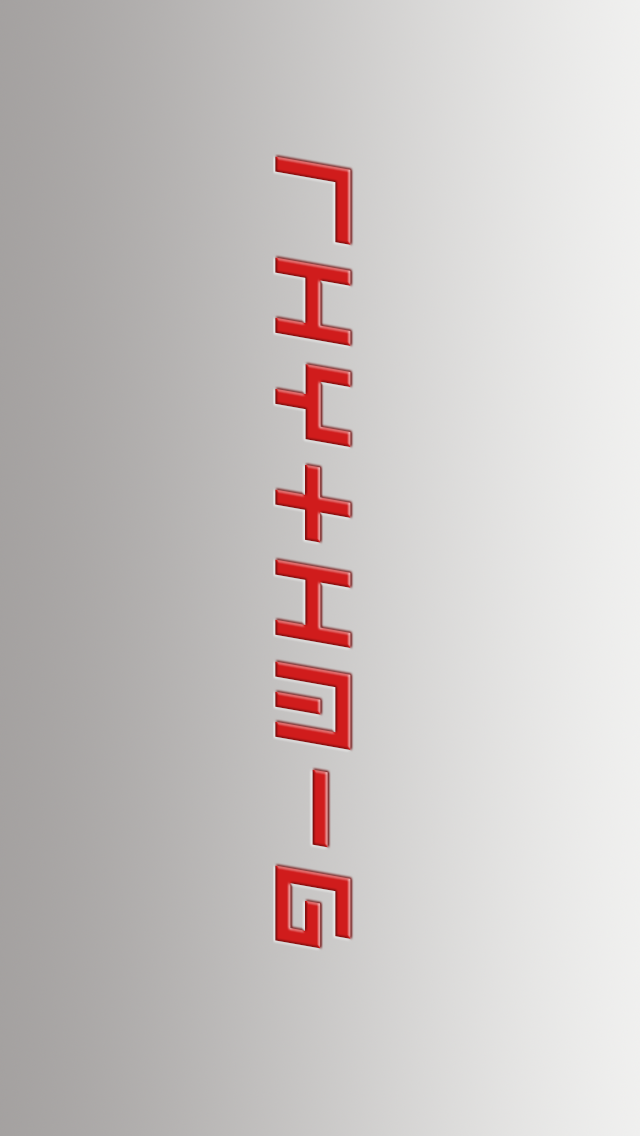
<style>
.page{position:relative;width:640px;height:1136px}
.page>*{position:absolute;margin:0}
.t1{font:149.9px "Beatbox";color:#d01c1c;font-style:italic}
</style>
<div class="page">
<p class="t1" style="left:275px;top:156px;width:76px;height:793px;rotate:90deg">rHYtHm-G</p>
</div>
